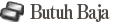
<style>
.page{position:relative;width:136px;height:22px;background:#ffffff}
.page>*{position:absolute;margin:0}
.t1{font:20px "RyuminPro-ExBold";letter-spacing:-0.08em;color:#4d4843;scale:0.85 1}
</style>
<div class="page">
<p class="t1" style="left:30px;top:4px;width:80px;height:18px">Butuh Baja</p>
</div>
